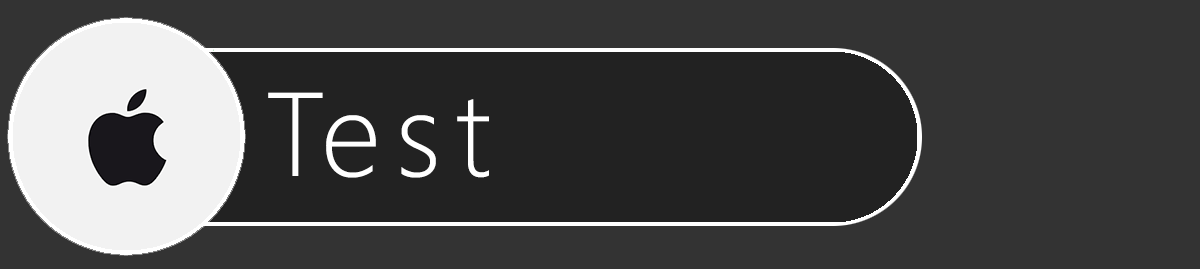
<style>
.page{position:relative;width:1200px;height:269px;background:#333333}
.page>*{position:absolute;margin:0}
.t1{font:118.7px "SegoeUI-Light";letter-spacing:0.12em;color:#ffffff}
</style>
<div class="page">
<p class="t1" style="left:268px;top:92px;width:221px;height:86px">Test</p>
</div>
